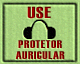
<style>
.page{position:relative;width:80px;height:64px}
.page>*{position:absolute;margin:0}
.t1{font:16px "Haettenschweiler";letter-spacing:0.04em;color:#9d0000;text-transform:uppercase;scale:1.23 1}
.t2{font:10.9px/10.7px "Haettenschweiler";letter-spacing:0.04em;text-transform:uppercase;scale:1.23 1}
</style>
<div class="page">
<p class="t1" style="left:27px;top:6px;width:24px;height:13px">USE</p>
<p class="t2" style="left:15px;top:40px;width:50px;height:19px;text-align:center">PROTETOR<br>AURICULAR</p>
</div>
